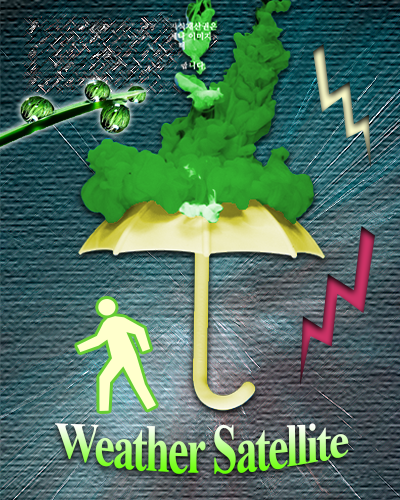
<style>
.page{position:relative;width:400px;height:500px}
.page>*{position:absolute;margin:0}
.t1{font:45px "TimesNewRomanPS-BoldMT";letter-spacing:-0.05em}
</style>
<div class="page">
<p class="t1" style="left:55px;top:423px;width:294px;height:52px">Weather Satellite</p>
</div>
